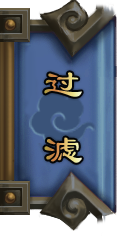
<style>
.page{position:relative;width:120px;height:236px}
.page>*{position:absolute;margin:0}
.t1{font:40px/72px "LiSu";letter-spacing:-0.115em}
</style>
<div class="page">
<p class="t1" style="left:44px;top:72px;width:38px;height:91px">过  滤</p>
</div>
